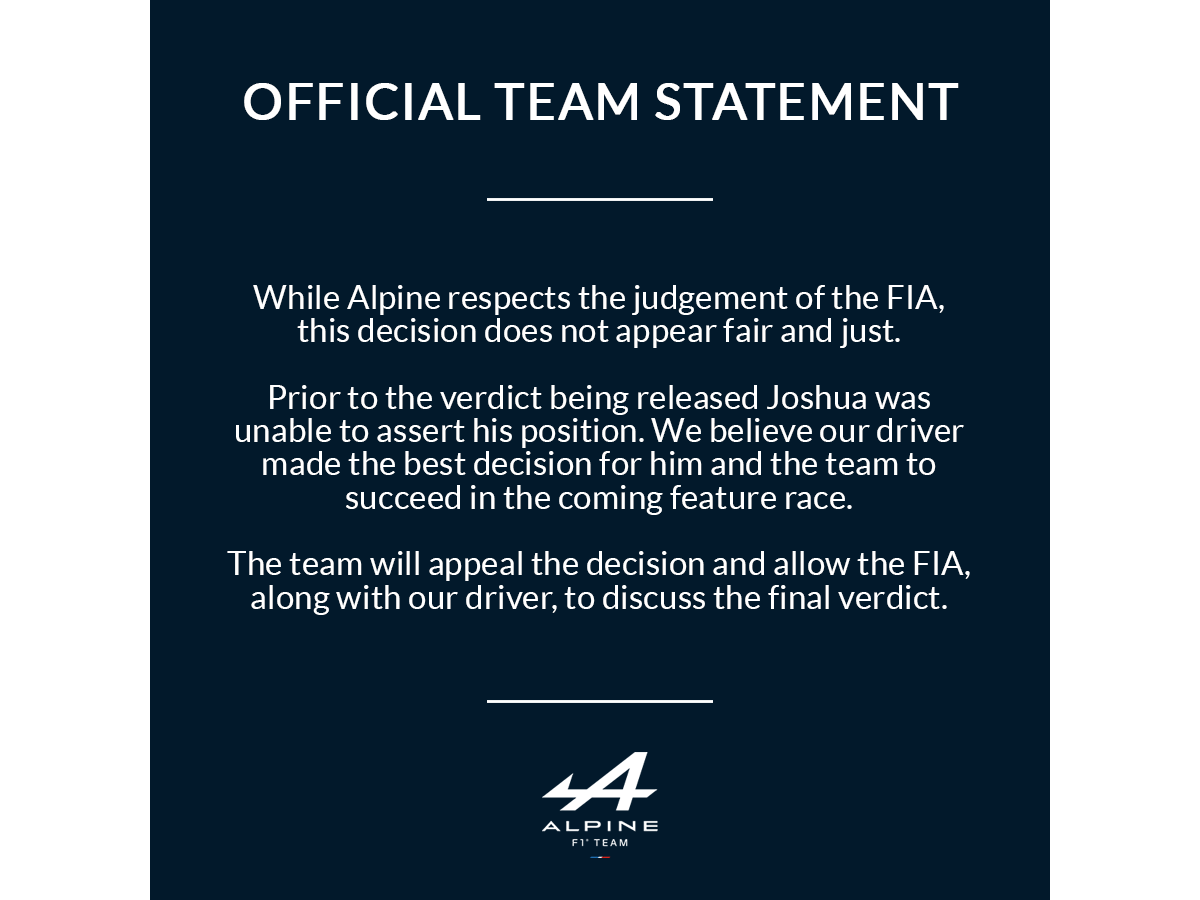
<style>
.page{position:relative;width:1200px;height:900px;background:#02192b}
.page>*{position:absolute;margin:0}
.t1{font:49.9px "Lato-Regular";letter-spacing:0.02em;color:#ffffff;font-weight:bold}
.t2{font:33.3px/33.3px "Lato-Regular";color:#ffffff}
</style>
<div class="page">
<p class="t1" style="left:244px;top:83px;width:715px;height:37px">OFFICIAL TEAM STATEMENT</p>
<p class="t2" style="left:227px;top:285px;width:743px;height:330px;text-align:center">While Alpine respects the judgement of the FIA, this decision does not appear fair and just. <br><br>Prior to the verdict being released Joshua was unable to assert his position. We believe our driver made the best decision for him and the team to succeed in the coming feature race.<br><br>The team will appeal the decision and allow the FIA, along with our driver, to discuss the final verdict.</p>
</div>
